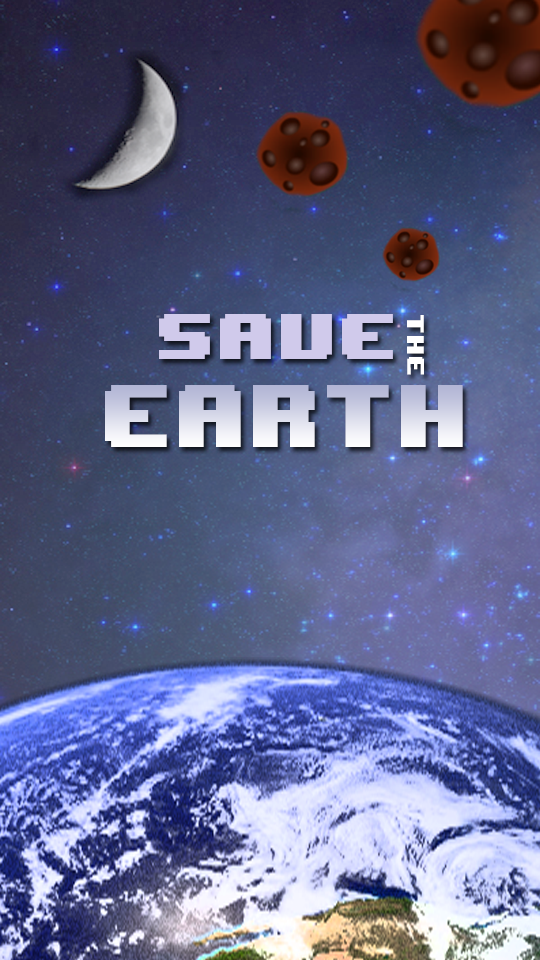
<style>
.page{position:relative;width:540px;height:960px}
.page>*{position:absolute;margin:0}
.t1{font:54.1px "8BITWONDERNominal";color:#d0caeb;scale:1.13 1}
.t2{font:20.1px "8BITWONDERNominal";color:#ffffff;scale:1.05 1}
.t3{font:74.4px "8BITWONDERNominal"}
</style>
<div class="page">
<p class="t1" style="left:159px;top:314px;width:234px;height:45px">Save</p>
<p class="t2" style="left:407px;top:315px;width:17px;height:60px;rotate:90deg">the</p>
<p class="t3" style="left:105px;top:385px;width:358px;height:62px">earth</p>
</div>
